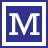
<style>
.page{position:relative;width:48px;height:48px;background:#2f318b}
.page>*{position:absolute;margin:0}
.t1{font:32px "Rockwell";color:#ffffff;scale:1.17 1}
</style>
<div class="page">
<p class="t1" style="left:9px;top:13px;width:31px;height:23px">M</p>
</div>
